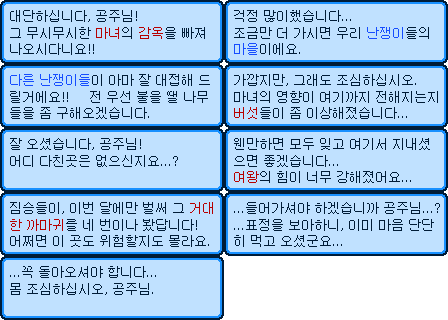
<style>
.page{position:relative;width:448px;height:320px;background:#c0e1ff}
.page>*{position:absolute;margin:0}
.t1{font:12.5px "Gulim";color:#001c37}
.t2{font:12.5px "Gulim";color:#b60000}
.t3{font:12.5px "Gulim";color:#164dff}
</style>
<div class="page">
<p class="t1" style="left:10px;top:10px;width:127px;height:12px">대단하십니다, 공주님!</p>
<p class="t1" style="left:234px;top:10px;width:117px;height:12px">걱정 많이했습니다...</p>
<p class="t1" style="left:10px;top:27px;width:195px;height:12px">그 무시무시한 <span class="t2">마녀</span>의 <span class="t2">감옥</span>을 빠져</p>
<p class="t1" style="left:234px;top:27px;width:195px;height:12px">조금만 더 가시면 우리 <span class="t3">난쟁이</span>들의</p>
<p class="t1" style="left:10px;top:43px;width:84px;height:12px">나오시다니요!!</p>
<p class="t1" style="left:234px;top:43px;width:66px;height:12px"><span class="t3">마을</span>이에요.</p>
<p class="t1" style="left:10px;top:74px;width:200px;height:12px"><span class="t3">다른 난쟁이들</span>이 아마 잘 대접해 드</p>
<p class="t1" style="left:234px;top:74px;width:182px;height:12px">가깝지만, 그래도 조심하십시오.</p>
<p class="t1" style="left:10px;top:91px;width:198px;height:12px">릴거에요!!     전 우선 불을 땔 나무</p>
<p class="t1" style="left:234px;top:91px;width:204px;height:12px">마녀의 영향이 여기까지 전해지는지</p>
<p class="t1" style="left:10px;top:107px;width:139px;height:12px">들을 좀 구해오겠습니다.</p>
<p class="t1" style="left:234px;top:107px;width:173px;height:12px"><span class="t2">버섯</span>들이 좀 이상해졌습니다...</p>
<p class="t1" style="left:10px;top:138px;width:131px;height:12px">잘 오셨습니다, 공주님!</p>
<p class="t1" style="left:234px;top:138px;width:196px;height:12px">웬만하면 모두 잊고 여기서 지내셨</p>
<p class="t1" style="left:10px;top:155px;width:168px;height:12px">어디 다친곳은 없으신지요...?</p>
<p class="t1" style="left:234px;top:155px;width:104px;height:12px">으면 좋겠습니다...</p>
<p class="t1" style="left:234px;top:171px;width:177px;height:12px"><span class="t2">여왕</span>의 힘이 너무 강해졌어요...</p>
<p class="t1" style="left:10px;top:202px;width:203px;height:12px">짐승들이, 이번 달에만 벌써 그 <span class="t2">거대</span></p>
<p class="t1" style="left:234px;top:202px;width:206px;height:12px">...들어가셔야 하겠습니까 공주님...?</p>
<p class="t1" style="left:10px;top:219px;width:187px;height:12px"><span class="t2">한 까마귀</span>를 네 번이나 봤답니다!</p>
<p class="t1" style="left:234px;top:219px;width:200px;height:12px">...표정을 보아하니, 이미 마음 단단</p>
<p class="t1" style="left:10px;top:235px;width:199px;height:12px">어쩌면 이 곳도 위험할지도 몰라요.</p>
<p class="t1" style="left:234px;top:235px;width:108px;height:12px">히 먹고 오셨군요...</p>
<p class="t1" style="left:10px;top:266px;width:146px;height:12px">...꼭 돌아오셔야 합니다...</p>
<p class="t1" style="left:10px;top:283px;width:143px;height:12px">몸 조심하십시오, 공주님.</p>
</div>
